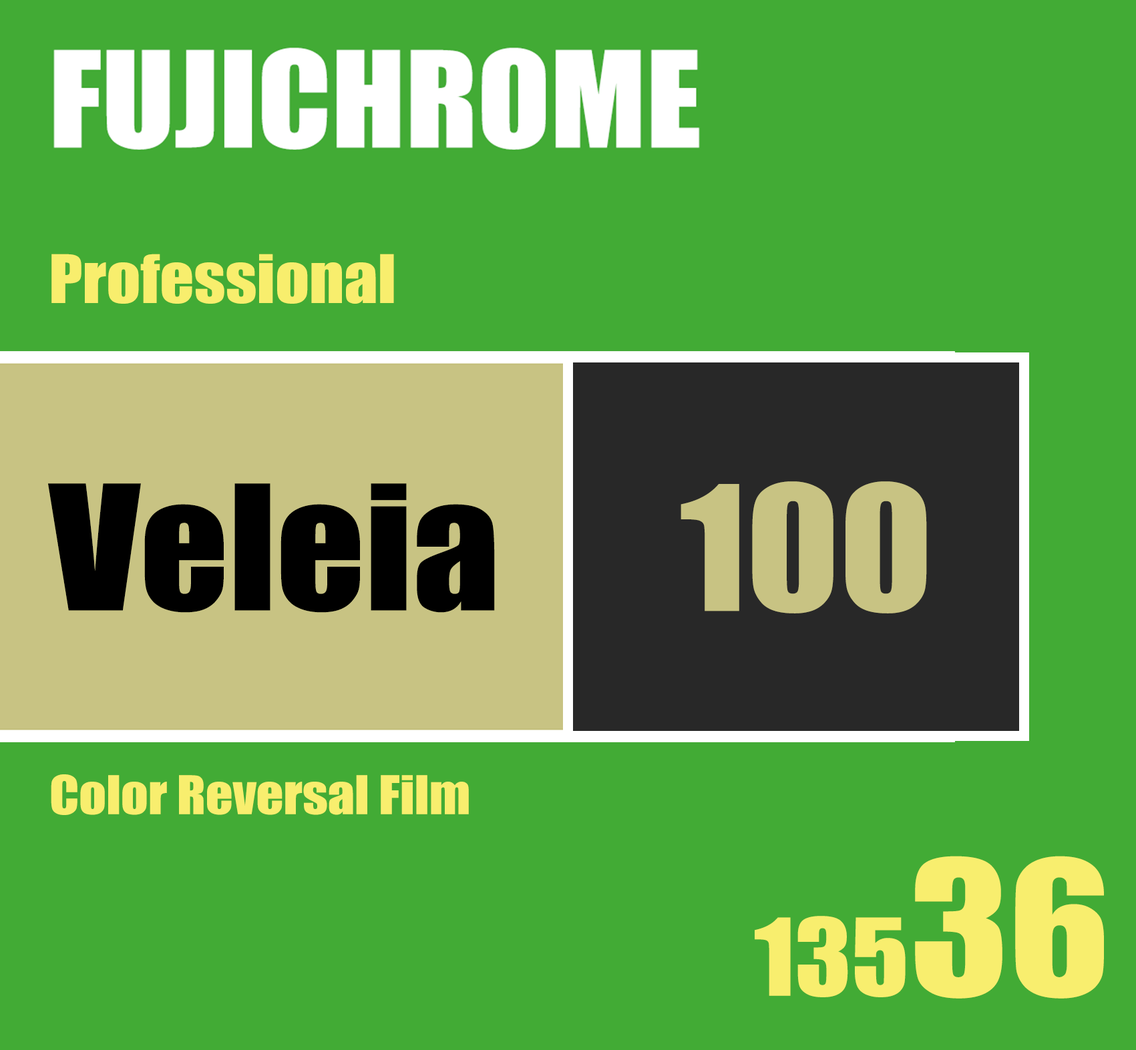
<style>
.page{position:relative;width:1136px;height:1050px;background:#42ab35}
.page>*{position:absolute;margin:0}
.t1{font:61.7px "Impact";color:#f8ee6d;scale:1.08 1}
.t2{font:160.5px "Impact";color:#000000;scale:1.08 1}
.t3{font:160.5px "Impact";color:#c8c383;scale:1.08 1}
.t4{font:49.4px "Impact";color:#f8ee6e;scale:1.08 1}
.t5{font:172.8px "Impact";color:#f8ee6e;scale:1.08 1}
.t6{font:98.8px "Impact";color:#f8ee6e;scale:1.08 1}
</style>
<div class="page">
<p class="t1" style="left:51px;top:254px;width:343px;height:50px">Professional</p>
<p class="t2" style="left:48px;top:483px;width:447px;height:130px">Veleia</p>
<p class="t3" style="left:680px;top:481px;width:247px;height:133px">100</p>
<p class="t4" style="left:51px;top:774px;width:418px;height:41px">Color Reversal Film</p>
<p class="t5" style="left:915px;top:856px;width:189px;height:143px">36</p>
<p class="t6" style="left:754px;top:916px;width:151px;height:81px">135</p>
</div>
